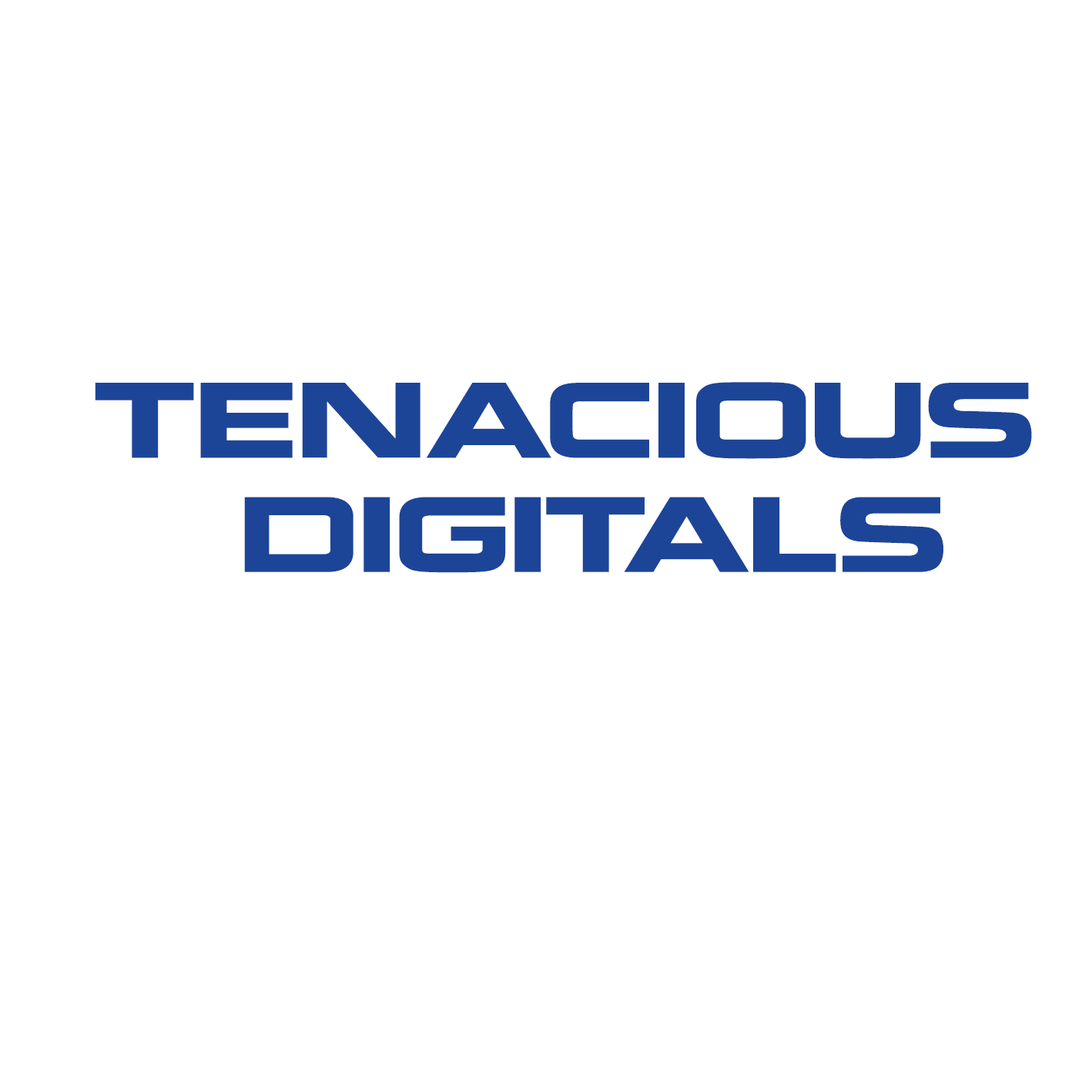
<style>
.page{position:relative;width:1092px;height:1092px;background:#ffffff}
.page>*{position:absolute;margin:0}
.t1{font:95.2px "NokiaKokia";color:#1c4598;scale:1.12 1}
</style>
<div class="page">
<p class="t1" style="left:95px;top:382px;width:937px;height:191px;text-align:center">TENACIOUS<br>   DIGITALS</p>
</div>
